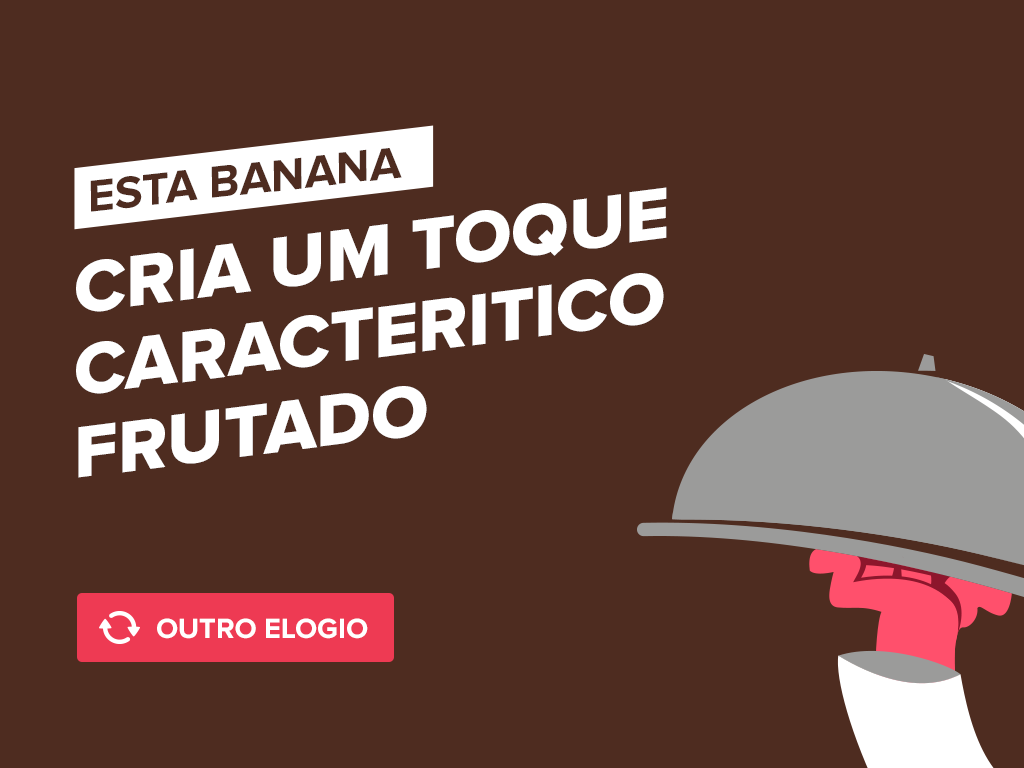
<style>
.page{position:relative;width:1024px;height:768px;background:#4e2c20}
.page>*{position:absolute;margin:0}
.t1{font:46.3px "ProximaNova-Bold";color:#4e2c20;text-transform:uppercase}
.t2{font:75.3px "ProximaNova-Extrabld";color:#ffffff;text-transform:uppercase}
.t3{font:29px "ProximaNova-Bold";color:#ffffff;text-transform:uppercase}
</style>
<div class="page">
<p class="t1" style="left:90px;top:148px;width:312px;height:64px;rotate:-6deg">esta banana</p>
<p class="t2" style="left:76px;top:187px;width:591px;height:291px;rotate:-7deg">Cria um toque caracteritico frutado</p>
<p class="t3" style="left:157px;top:618px;width:211px;height:21px">outro elogio</p>
</div>
